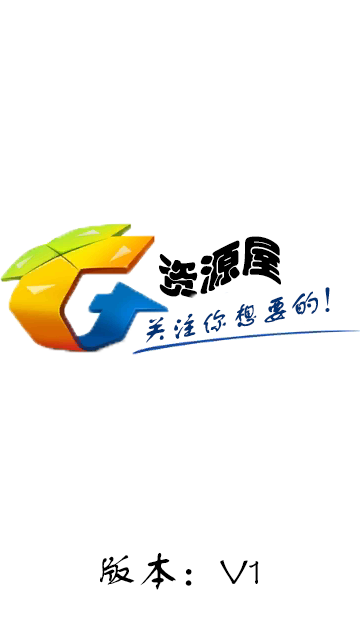
<style>
.page{position:relative;width:360px;height:640px;background:#ffffff}
.page>*{position:absolute;margin:0}
.t1{font:41.7px "STHupo";color:#000000}
.t2{font:41.7px "FZSTK--GBK1-0";color:#000000}
</style>
<div class="page">
<p class="t1" style="left:159px;top:236px;width:122px;height:63px">资源屋</p>
<p class="t2" style="left:100px;top:552px;width:159px;height:38px">版本：V1</p>
</div>
